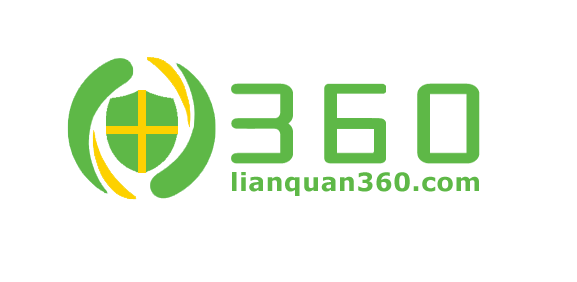
<style>
.page{position:relative;width:577px;height:282px;background:#ffffff}
.page>*{position:absolute;margin:0}
.t1{font:25px "Verdana-Bold";letter-spacing:0.025em;color:#5eb847}
</style>
<div class="page">
<p class="t1" style="left:232px;top:172px;width:247px;height:24px">lianquan360.com</p>
</div>
